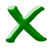
<style>
.page{position:relative;width:50px;height:50px;background:#ffffff}
.page>*{position:absolute;margin:0}
.t1{font:54.5px "OneStrokeScriptLetPlain";scale:1.68 1}
</style>
<div class="page">
<p class="t1" style="left:5px;top:5px;width:42px;height:38px">X</p>
</div>
